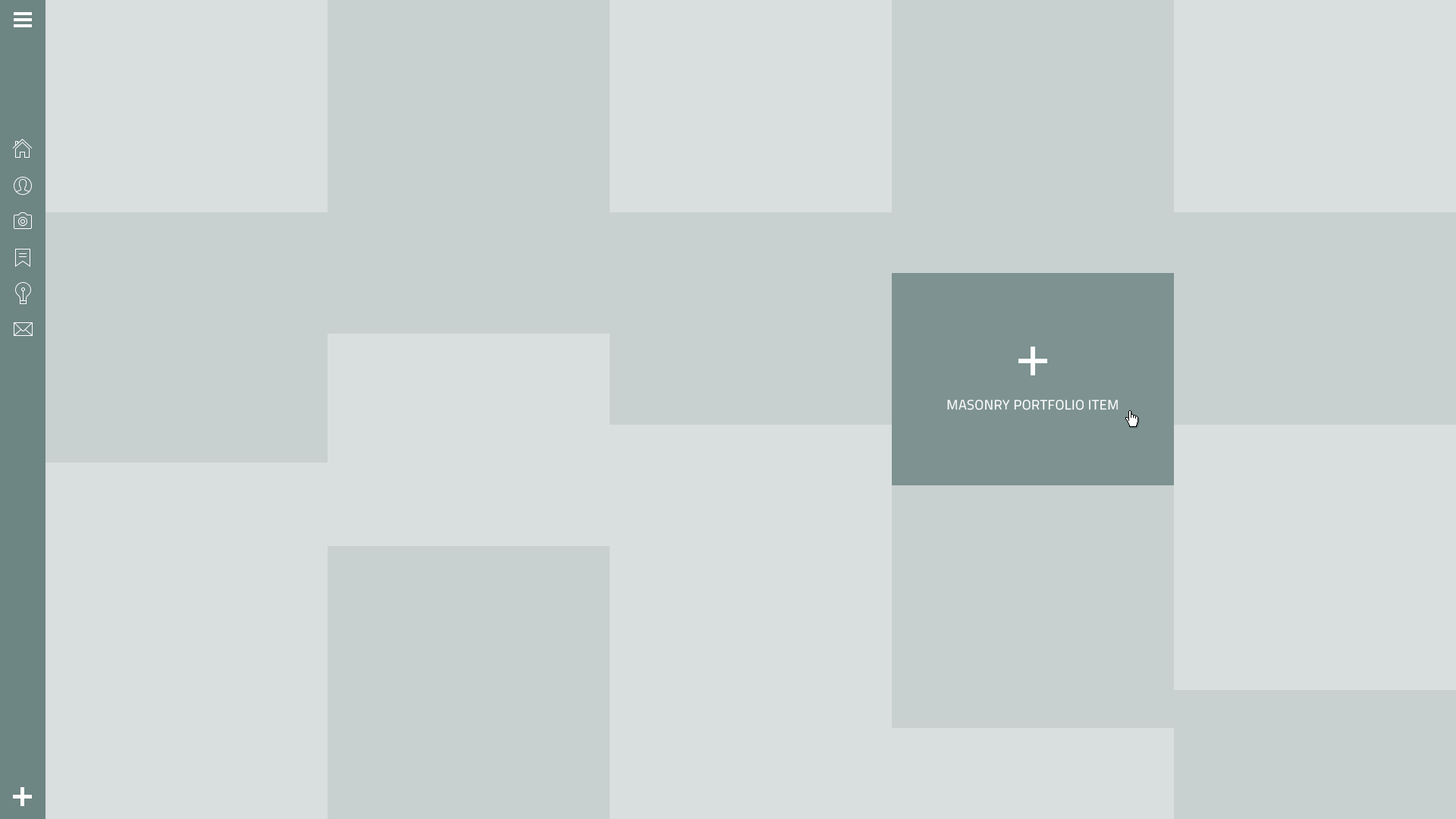
<style>
.page{position:relative;width:1456px;height:819px;background:#c9d0d0}
.page>*{position:absolute;margin:0}
.t1{font:13.6px "TitilliumWeb-Regular";letter-spacing:0.03em;color:#ffffff;text-transform:uppercase}
</style>
<div class="page">
<p class="t1" style="left:947px;top:400px;width:171px;height:10px">masonry Portfolio item</p>
</div>
